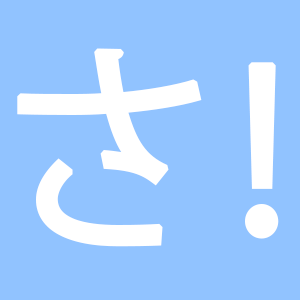
<style>
.page{position:relative;width:300px;height:300px;background:#91c3ff}
.page>*{position:absolute;margin:0}
.t1{font:220px "KozGoPr6N-Regular";color:#ffffff;font-weight:bold}
</style>
<div class="page">
<p class="t1" style="left:17px;top:48px;width:262px;height:199px">さ！</p>
</div>
